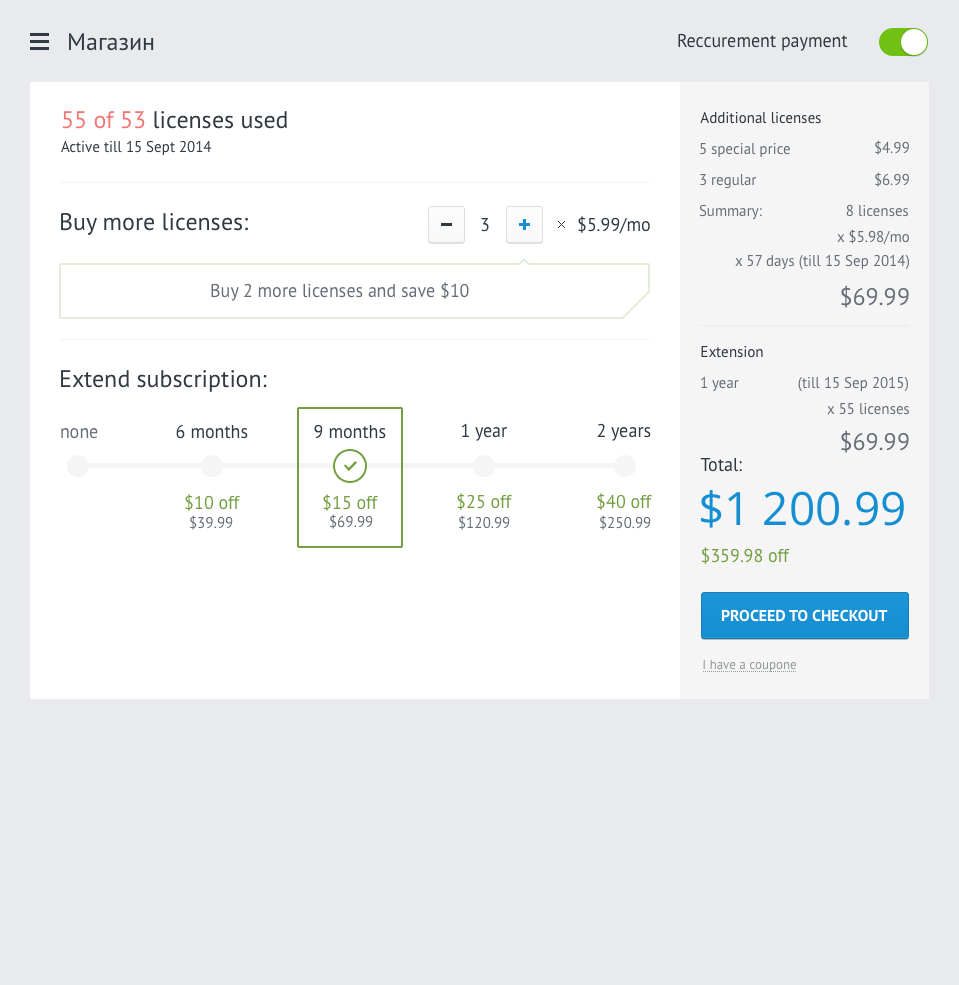
<style>
.page{position:relative;width:959px;height:985px;background:#e9eaed}
.page>*{position:absolute;margin:0}
.t1{font:24px "PTSans-Regular";color:#313942}
.t2{font:18px "PTSans-Regular";color:#313942}
.t3{font:15px "PTSans-Regular";color:#313942}
.t4{font:24px "PTSans-Regular";color:#f37575}
.t5{font:15px "PTSans-Regular";color:#2e3640}
.t6{font:15px "PTSans-Regular";color:#676e79}
.t7{font:18px "PTSans-Regular";color:#676e79}
.t8{font:24px "PTSans-Regular";color:#676e79}
.t9{font:18px "PTSans-Regular";color:#749e42}
.t10{font:18px "PTSans-Regular";color:#2e3640}
.t11{font:46px "OpenSans";color:#158fd2}
.t12{font:16px "PTSans-Bold";color:#ffffff;text-transform:uppercase}
.t13{font:13px "PTSans-Regular";color:#92989b}
</style>
<div class="page">
<p class="t1" style="left:69px;top:33px;width:85px;height:18px">Магазин</p>
<p class="t2" style="left:678px;top:33px;width:170px;height:18px">Reccurement payment</p>
<p class="t3" style="left:61px;top:111px;width:226px;height:44px"><span class="t4">55 of 53</span><span class="t1"> licenses used<br></span>Active till 15 Sept 2014</p>
<p class="t5" style="left:700px;top:111px;width:121px;height:13px">Additional licenses</p>
<p class="t6" style="left:700px;top:143px;width:90px;height:14px">5 special price</p>
<p class="t6" style="left:875px;top:140px;width:34px;height:15px">$4.99</p>
<p class="t6" style="left:700px;top:174px;width:57px;height:15px">3 regular</p>
<p class="t6" style="left:875px;top:172px;width:34px;height:15px">$6.99</p>
<p class="t6" style="left:699px;top:204px;width:63px;height:15px">Summary:</p>
<p class="t6" style="left:846px;top:204px;width:62px;height:13px">8 licenses</p>
<p class="t1" style="left:61px;top:213px;width:187px;height:22px">Buy more licenses:</p>
<p class="t2" style="left:481px;top:218px;width:8px;height:14px">3</p>
<p class="t2" style="left:578px;top:216px;width:72px;height:18px">$5.99/mo</p>
<p class="t6" style="left:735px;top:229px;width:174px;height:41px;text-align:right">x $5.98/mo<br>x 57 days (till 15 Sep 2014)</p>
<p class="t7" style="left:211px;top:282px;width:258px;height:19px">Buy 2 more licenses and save $10</p>
<p class="t8" style="left:841px;top:285px;width:68px;height:23px">$69.99</p>
<p class="t5" style="left:701px;top:346px;width:62px;height:12px">Extension</p>
<p class="t1" style="left:61px;top:370px;width:206px;height:22px">Extend subscription:</p>
<p class="t6" style="left:701px;top:376px;width:207px;height:16px">1 year (till 15 Sep 2015)</p>
<p class="t6" style="left:827px;top:403px;width:82px;height:12px">x 55 licenses</p>
<p class="t2" style="left:176px;top:424px;width:72px;height:87px;text-align:center">6 months<br><span class="t9">$10 off</span></p>
<p class="t2" style="left:314px;top:424px;width:72px;height:87px;text-align:center">9 months<br><span class="t9">$15 off</span></p>
<p class="t9" style="left:457px;top:423px;width:55px;height:87px;text-align:center"><span class="t2">1 year<br></span>$25 off</p>
<p class="t2" style="left:597px;top:423px;width:55px;height:87px;text-align:center">2 years<br><span class="t9">$40 off</span></p>
<p class="t7" style="left:61px;top:428px;width:37px;height:11px">none</p>
<p class="t8" style="left:841px;top:430px;width:68px;height:23px">$69.99</p>
<p class="t10" style="left:700px;top:458px;width:42px;height:14px">Total:</p>
<p class="t11" style="left:700px;top:490px;width:204px;height:38px">$1 200.99</p>
<p class="t6" style="left:190px;top:515px;width:43px;height:15px">$39.99</p>
<p class="t6" style="left:330px;top:514px;width:43px;height:15px">$69.99</p>
<p class="t6" style="left:459px;top:515px;width:51px;height:15px">$120.99</p>
<p class="t6" style="left:600px;top:515px;width:51px;height:15px">$250.99</p>
<p class="t9" style="left:702px;top:547px;width:88px;height:17px">$359.98 off</p>
<p class="t12" style="left:721px;top:609px;width:167px;height:13px">Proceed to Checkout</p>
<p class="t13" style="left:703px;top:659px;width:93px;height:13px">I have a coupone</p>
</div>
